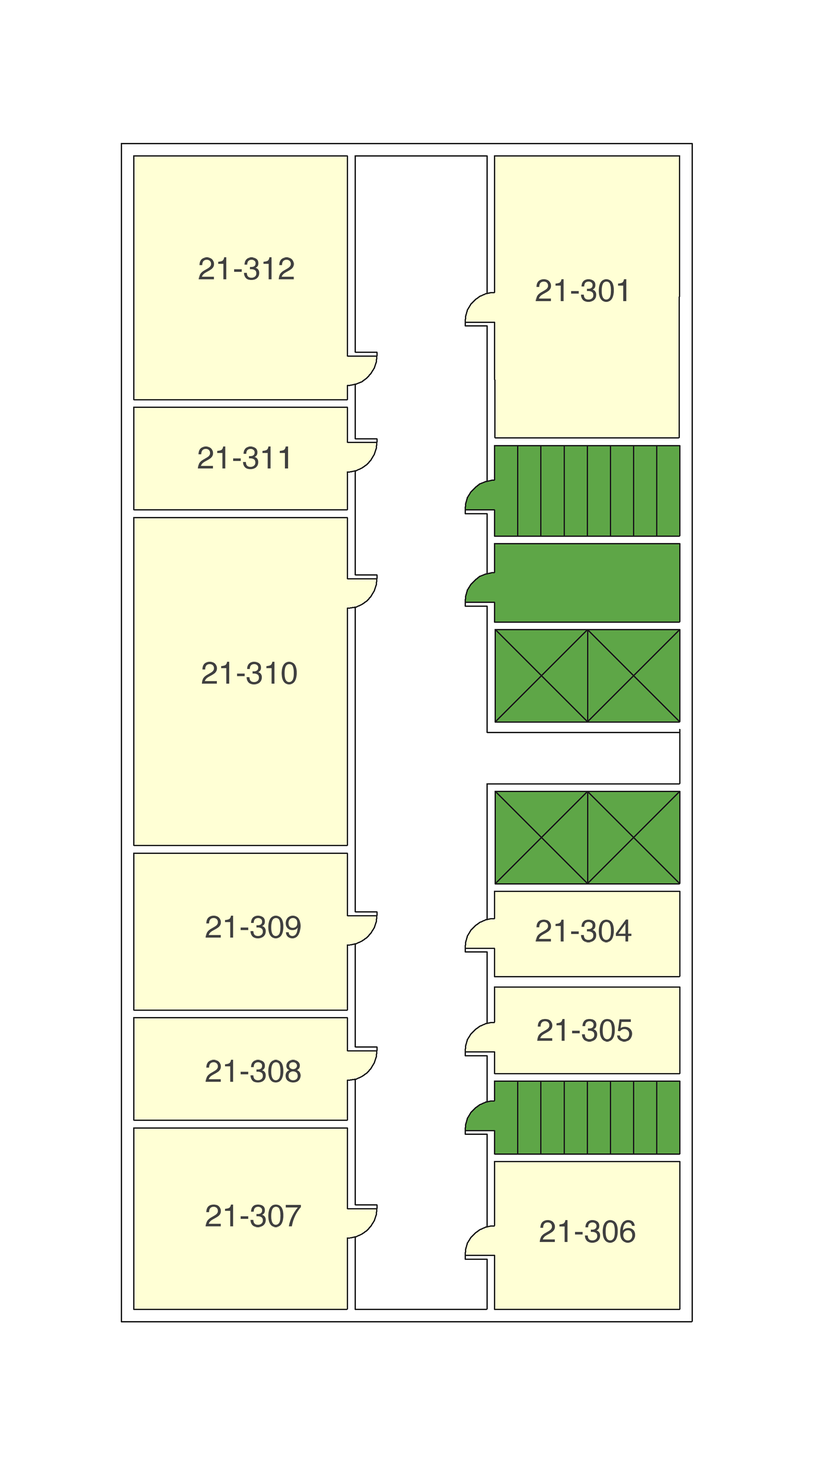
<style>
.page{position:relative;width:814px;height:1465px;background:#ffffff}
.page>*{position:absolute;margin:0}
.t1{font:31.3px "Helvetica";color:#3f3f3f}
</style>
<div class="page">
<p class="t1" style="left:199px;top:257px;width:95px;height:23px">21-312</p>
<p class="t1" style="left:536px;top:279px;width:90px;height:23px">21-301</p>
<p class="t1" style="left:198px;top:446px;width:90px;height:23px">21-311</p>
<p class="t1" style="left:202px;top:662px;width:95px;height:23px">21-310</p>
<p class="t1" style="left:206px;top:916px;width:95px;height:22px">21-309</p>
<p class="t1" style="left:536px;top:919px;width:96px;height:24px">21-304</p>
<p class="t1" style="left:537px;top:1019px;width:95px;height:23px">21-305</p>
<p class="t1" style="left:206px;top:1060px;width:95px;height:23px">21-308</p>
<p class="t1" style="left:206px;top:1205px;width:95px;height:22px">21-307</p>
<p class="t1" style="left:540px;top:1220px;width:95px;height:23px">21-306</p>
</div>
